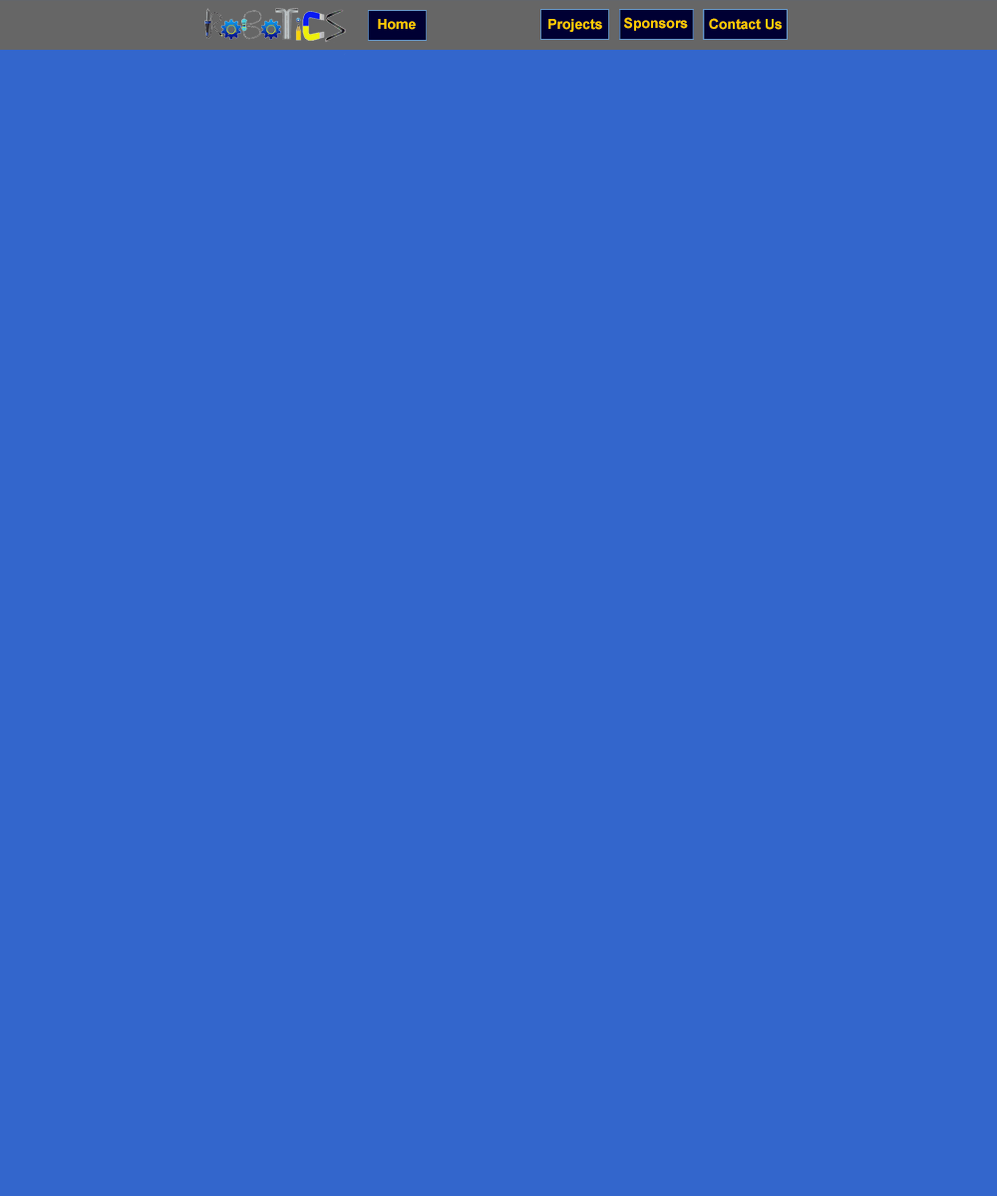
<style>
.page{position:relative;width:997px;height:1196px;background:#3366cc}
.page>*{position:absolute;margin:0}
.t1{font:14px "Arial-BoldMT";color:#ffcc00}
</style>
<div class="page">
<p class="t1" style="left:624px;top:17px;width:64px;height:14px">Sponsors</p>
<p class="t1" style="left:709px;top:18px;width:73px;height:12px">Contact Us</p>
<p class="t1" style="left:378px;top:19px;width:38px;height:11px">Home</p>
<p class="t1" style="left:548px;top:19px;width:54px;height:13px">Projects</p>
</div>
